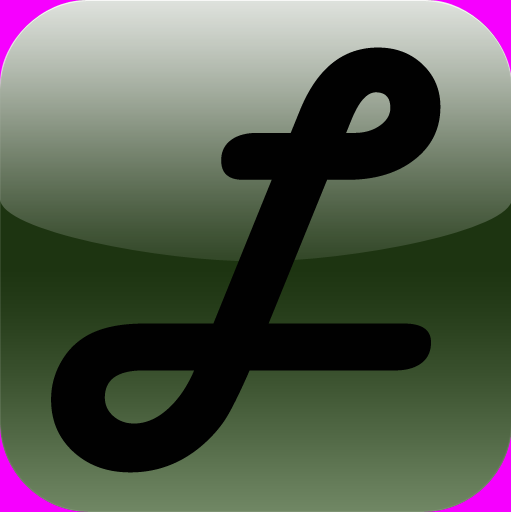
<style>
.page{position:relative;width:511px;height:512px;background:#010101}
.page>*{position:absolute;margin:0}
.t1{font:400px "HarlowSolid";color:#010101}
</style>
<div class="page">
<p class="t1" style="left:51px;top:47px;width:390px;height:426px">L</p>
</div>
